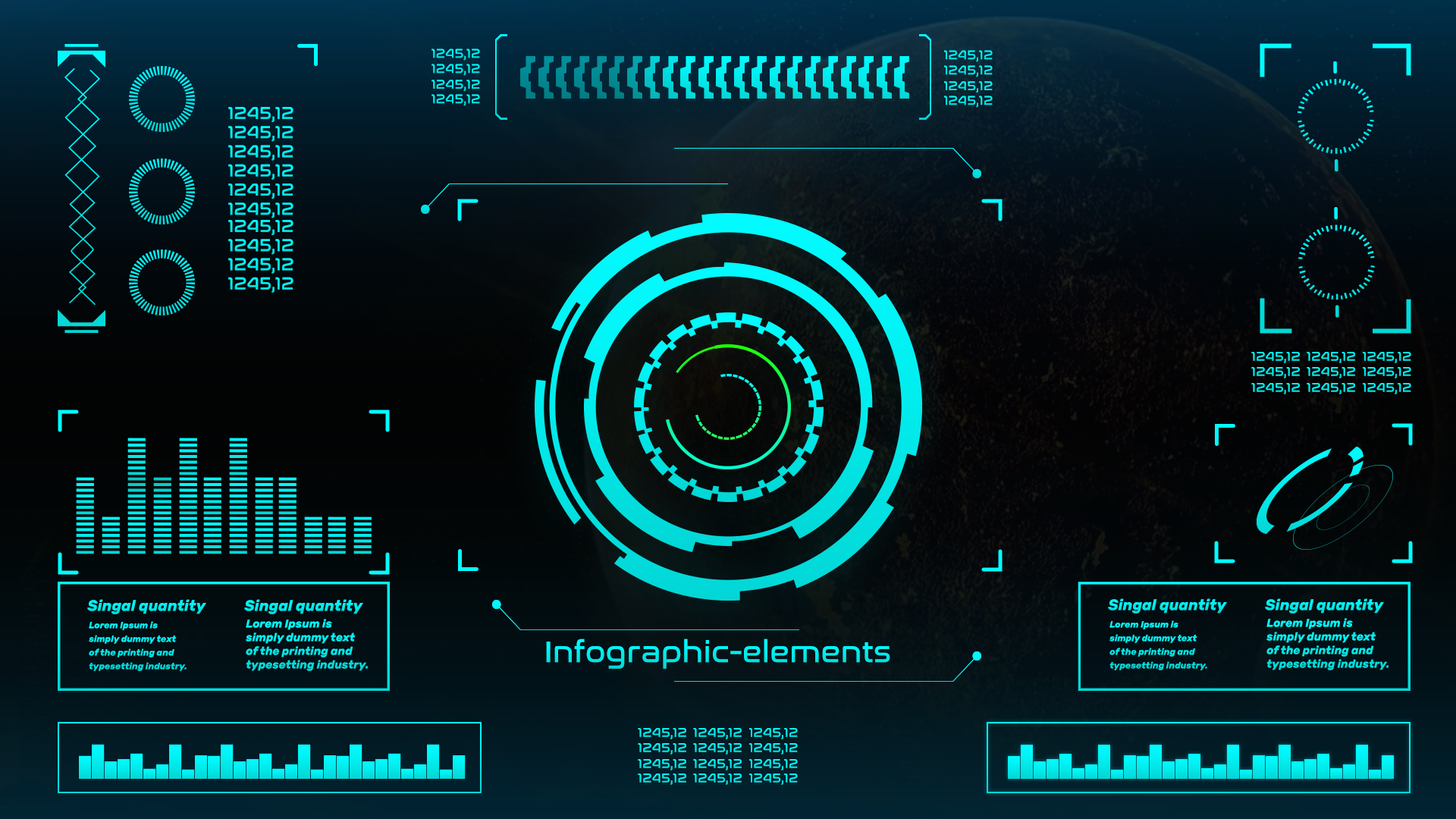
<style>
.page{position:relative;width:1456px;height:819px}
.page>*{position:absolute;margin:0}
.t1{font:13.2px "NasalizationRg-Regular";color:#01eeef}
.t2{font:13.2px "NasalizationRg-Regular";color:#01ebec}
.t3{font:17.7px "NasalizationRg-Regular";color:#01eff0}
.t4{font:17.7px "NasalizationRg-Regular";color:#01f1f2}
.t5{font:13.2px "NasalizationRg-Regular";color:#01f0f2}
.t6{font:15.2px "Rubik-BoldItalic";color:#01edef}
.t7{font:9.1px/13.6px "Rubik-BoldItalic";color:#02e7e8}
.t8{font:11.4px/13.6px "Rubik-BoldItalic";color:#02e8e9}
.t9{font:30.3px "NasalizationRg-Regular";color:#01edee}
</style>
<div class="page">
<p class="t1" style="left:431px;top:49px;width:49px;height:12px">1245,12</p>
<p class="t1" style="left:944px;top:50px;width:49px;height:12px">1245,12</p>
<p class="t1" style="left:431px;top:64px;width:49px;height:12px">1245,12</p>
<p class="t1" style="left:944px;top:65px;width:49px;height:12px">1245,12</p>
<p class="t2" style="left:431px;top:80px;width:49px;height:11px">1245,12</p>
<p class="t2" style="left:944px;top:81px;width:49px;height:12px">1245,12</p>
<p class="t1" style="left:431px;top:94px;width:49px;height:12px">1245,12</p>
<p class="t1" style="left:944px;top:96px;width:49px;height:12px">1245,12</p>
<p class="t3" style="left:228px;top:107px;width:65px;height:15px">1245,12</p>
<p class="t3" style="left:228px;top:126px;width:65px;height:16px">1245,12</p>
<p class="t4" style="left:228px;top:145px;width:65px;height:16px">1245,12</p>
<p class="t4" style="left:228px;top:164px;width:65px;height:16px">1245,12</p>
<p class="t3" style="left:228px;top:184px;width:65px;height:15px">1245,12</p>
<p class="t3" style="left:228px;top:202px;width:65px;height:16px">1245,12</p>
<p class="t3" style="left:228px;top:220px;width:65px;height:15px">1245,12</p>
<p class="t3" style="left:228px;top:239px;width:65px;height:16px">1245,12</p>
<p class="t4" style="left:228px;top:258px;width:65px;height:16px">1245,12</p>
<p class="t4" style="left:228px;top:277px;width:65px;height:16px">1245,12</p>
<p class="t5" style="left:1251px;top:352px;width:49px;height:11px">1245,12</p>
<p class="t5" style="left:1307px;top:352px;width:48px;height:11px">1245,12</p>
<p class="t5" style="left:1363px;top:352px;width:48px;height:11px">1245,12</p>
<p class="t5" style="left:1251px;top:367px;width:49px;height:11px">1245,12</p>
<p class="t5" style="left:1307px;top:367px;width:48px;height:11px">1245,12</p>
<p class="t5" style="left:1363px;top:367px;width:48px;height:11px">1245,12</p>
<p class="t5" style="left:1251px;top:383px;width:49px;height:11px">1245,12</p>
<p class="t5" style="left:1307px;top:383px;width:48px;height:11px">1245,12</p>
<p class="t5" style="left:1363px;top:383px;width:48px;height:11px">1245,12</p>
<p class="t6" style="left:87px;top:599px;width:119px;height:15px">Singal quantity</p>
<p class="t6" style="left:244px;top:599px;width:119px;height:15px">Singal quantity</p>
<p class="t6" style="left:1108px;top:598px;width:119px;height:15px">Singal quantity</p>
<p class="t6" style="left:1265px;top:598px;width:119px;height:15px">Singal quantity</p>
<p class="t7" style="left:89px;top:621px;width:98px;height:50px">Lorem Ipsum is <br>simply dummy text <br>of the printing and <br>typesetting industry.</p>
<p class="t8" style="left:246px;top:619px;width:123px;height:52px">Lorem Ipsum is <br>simply dummy text <br>of the printing and <br>typesetting industry.</p>
<p class="t7" style="left:1109px;top:620px;width:98px;height:50px">Lorem Ipsum is <br>simply dummy text <br>of the printing and <br>typesetting industry.</p>
<p class="t8" style="left:1266px;top:618px;width:123px;height:52px">Lorem Ipsum is <br>simply dummy text <br>of the printing and <br>typesetting industry.</p>
<p class="t9" style="left:546px;top:639px;width:344px;height:30px">Infographic-elements</p>
<p class="t5" style="left:638px;top:728px;width:48px;height:11px">1245,12</p>
<p class="t5" style="left:693px;top:728px;width:49px;height:11px">1245,12</p>
<p class="t5" style="left:749px;top:728px;width:49px;height:11px">1245,12</p>
<p class="t5" style="left:638px;top:743px;width:48px;height:12px">1245,12</p>
<p class="t5" style="left:693px;top:743px;width:49px;height:12px">1245,12</p>
<p class="t5" style="left:749px;top:743px;width:49px;height:12px">1245,12</p>
<p class="t5" style="left:638px;top:759px;width:48px;height:11px">1245,12</p>
<p class="t5" style="left:693px;top:759px;width:49px;height:11px">1245,12</p>
<p class="t5" style="left:749px;top:759px;width:49px;height:11px">1245,12</p>
<p class="t5" style="left:638px;top:773px;width:48px;height:12px">1245,12</p>
<p class="t5" style="left:693px;top:773px;width:49px;height:12px">1245,12</p>
<p class="t5" style="left:749px;top:773px;width:49px;height:12px">1245,12</p>
</div>
